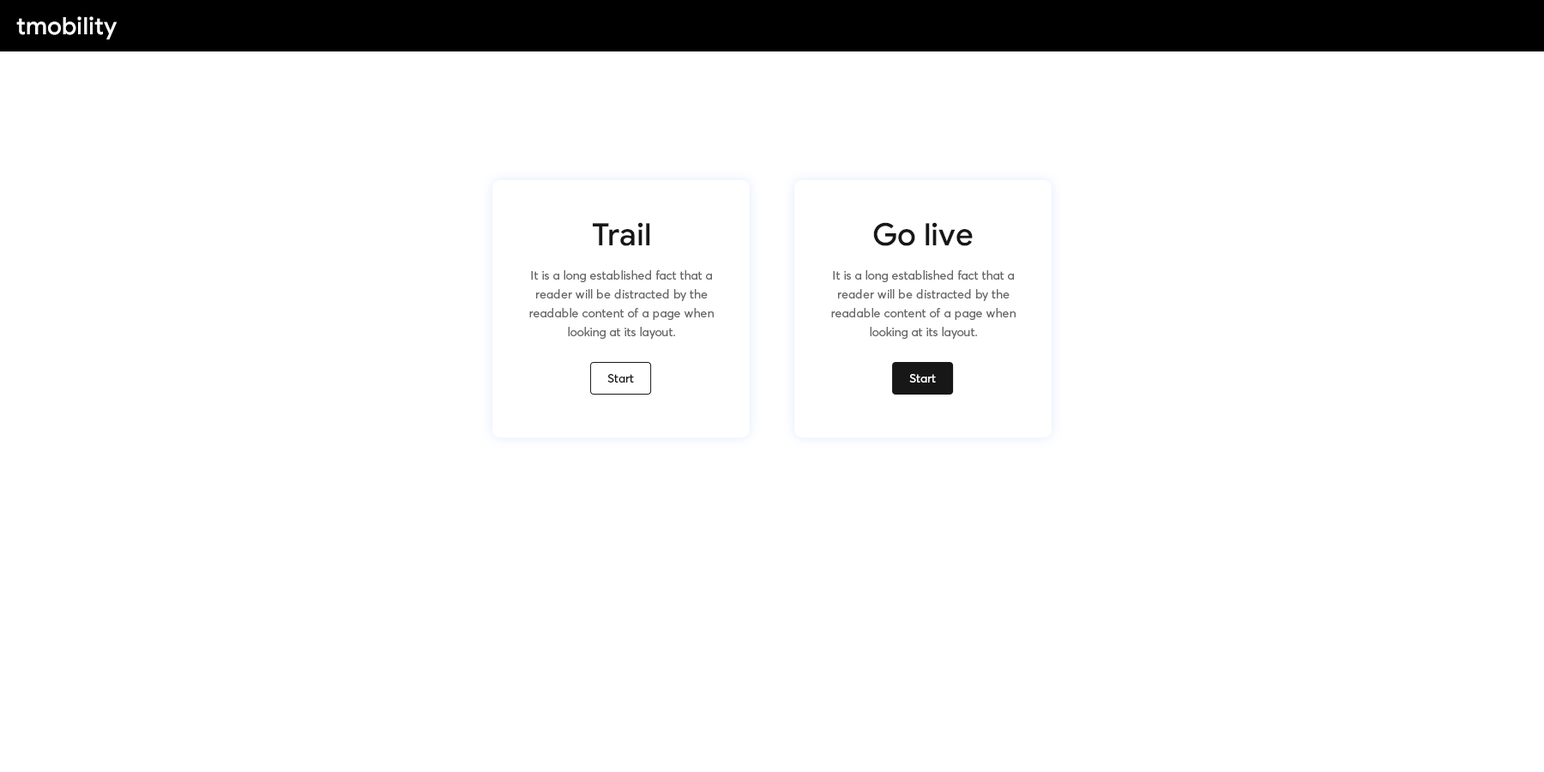
<style>
.page{position:relative;width:1544px;height:772px;background:#ffffff}
.page>*{position:absolute;margin:0}
.t1{font:24px "GoogleSans-Medium";color:#ffffff}
.t2{font:30.9px "GoogleSans-Medium";color:#171717}
.t3{font:12px/18.9px "AvertaDemoPECuttedDemo-Regular";color:#666666}
.t4{font:12px "AvertaDemoPECuttedDemo-Regular";color:#171717}
.t5{font:12px "AvertaDemoPECuttedDemo-Regular";color:#fefefe}
</style>
<div class="page">
<p class="t1" style="left:16px;top:16px;width:101px;height:23px">tmobility</p>
<p class="t2" style="left:593px;top:222px;width:57px;height:24px">Trail</p>
<p class="t2" style="left:873px;top:222px;width:100px;height:24px">Go live</p>
<p class="t3" style="left:529px;top:270px;width:185px;height:69px;text-align:center">It is a long established fact that a reader will be distracted by the readable content of a page when looking at its layout.</p>
<p class="t3" style="left:831px;top:270px;width:185px;height:69px;text-align:center">It is a long established fact that a reader will be distracted by the readable content of a page when looking at its layout.</p>
<p class="t4" style="left:607px;top:374px;width:27px;height:9px">Start</p>
<p class="t5" style="left:909px;top:374px;width:27px;height:9px">Start</p>
</div>
